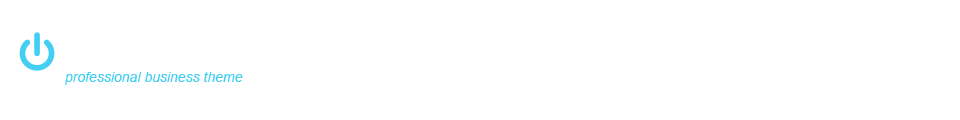
<style>
.page{position:relative;width:960px;height:120px;background:#ffffff}
.page>*{position:absolute;margin:0}
.t1{font:14px "Arial-ItalicMT";color:#44cef1}
</style>
<div class="page">
<p class="t1" style="left:65px;top:72px;width:178px;height:13px">professional business theme</p>
</div>
